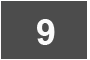
<style>
.page{position:relative;width:90px;height:60px;background:#4c4c4c}
.page>*{position:absolute;margin:0}
.t1{font:36px "Arial-BoldMT";color:#fafafa}
</style>
<div class="page">
<p class="t1" style="left:37px;top:19px;width:18px;height:26px">9</p>
</div>
